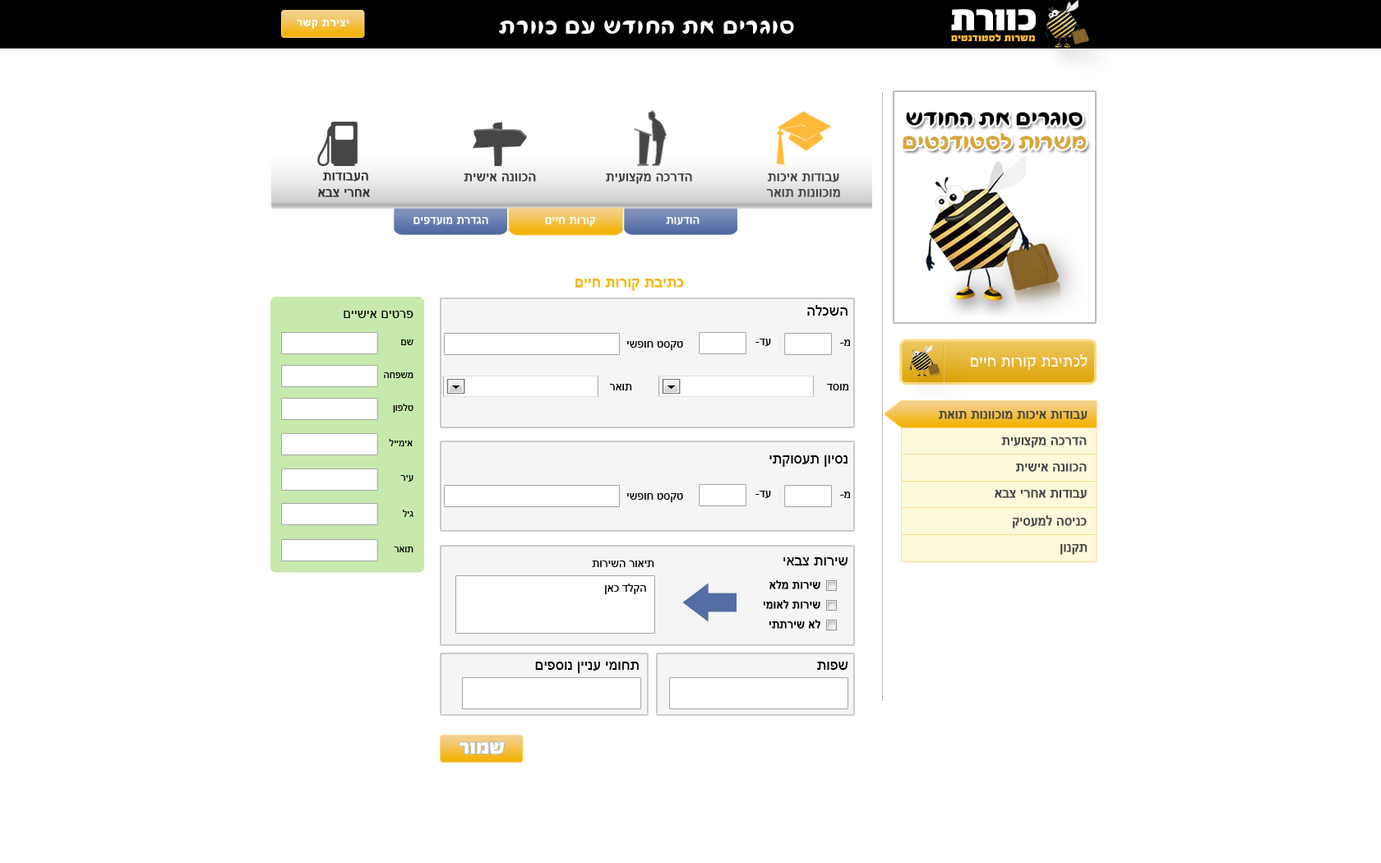
<style>
.page{position:relative;width:1381px;height:863px;background:#ffffff}
.page>*{position:absolute;margin:0}
.t1{font:11.5px "Arial-BoldMT";letter-spacing:0.03em;color:#ffffff}
.t2{font:28.8px "FbFlamingo-Regular";letter-spacing:0.03em;color:#ffffff}
.t3{font:9.9px "FbAdrenalin-Black";letter-spacing:0.03em;color:#ffba3a}
.t4{font:13.2px "ArialMT";color:#333333;font-weight:bold}
.t5{font:13.2px "ArialMT";color:#3c3c3c;font-weight:bold}
.t6{font:13.2px "ArialMT";color:#414141;font-weight:bold}
.t7{font:13.2px "ArialMT";color:#484848;font-weight:bold}
.t8{font:11.5px "ArialMT";color:#ffffff;font-weight:bold}
.t9{font:14.8px "ArialMT";color:#f3b510;font-weight:bold}
.t10{font:14.8px "ArialMT";color:#000000}
.t11{font:13.2px "ArialMT";color:#000000}
.t12{font:9.9px "ArialMT";color:#010101}
.t13{font:11.5px "ArialMT";color:#000000}
.t14{font:16.4px "FbConcept-Regular";letter-spacing:0.03em;color:#ffffff}
.t15{font:12.9px "ArialMT";color:#464646;font-weight:bold}
.t16{font:11.5px "ArialMT";color:#010101}
.t17{font:11.5px/19.7px "ArialMT";color:#010101;font-weight:bold}
.t18{font:19.7px "FbAdrenalin-Black";color:#ffffff}
</style>
<div class="page">
<p class="t1" style="left:297px;top:20px;width:52px;height:9px">רשק תריצי</p>
<p class="t2" style="left:499px;top:21px;width:295px;height:14px">תרווכ םע שדוחה תא םירגוס</p>
<p class="t3" style="left:951px;top:34px;width:84px;height:8px">םיטנדוטסל תורשמ</p>
<p class="t4" style="left:318px;top:173px;width:52px;height:24px;text-align:center">תודובעה<br>אבצ ירחא</p>
<p class="t5" style="left:464px;top:173px;width:72px;height:9px">תישיא הנווכה</p>
<p class="t6" style="left:606px;top:173px;width:86px;height:11px">תיעוצקמ הכרדה</p>
<p class="t7" style="left:766px;top:173px;width:74px;height:24px;text-align:center">תוכיא תודובע<br>ראות תונווכומ</p>
<p class="t8" style="left:414px;top:217px;width:286px;height:10px">םיפדעומ תרדגה                םייח תורוק                    תועדוה</p>
<p class="t9" style="left:576px;top:279px;width:108px;height:12px">םייח תורוק תביתכ</p>
<p class="t10" style="left:807px;top:305px;width:41px;height:11px">הלכשה</p>
<p class="t11" style="left:344px;top:311px;width:70px;height:7px">םיישיא םיטרפ</p>
<p class="t12" style="left:401px;top:340px;width:13px;height:5px">םש</p>
<p class="t13" style="left:627px;top:341px;width:56px;height:9px">ישפוח טסקט</p>
<p class="t13" style="left:756px;top:339px;width:15px;height:7px">-דע</p>
<p class="t13" style="left:840px;top:340px;width:10px;height:6px">-מ</p>
<p class="t14" style="left:971px;top:354px;width:117px;height:16px">םייח תורוק תביתכל</p>
<p class="t12" style="left:384px;top:372px;width:30px;height:6px">החפשמ</p>
<p class="t13" style="left:609px;top:384px;width:23px;height:7px">ראות</p>
<p class="t13" style="left:827px;top:384px;width:21px;height:7px">דסומ</p>
<p class="t12" style="left:393px;top:404px;width:21px;height:9px">ןופלט</p>
<p class="t15" style="left:939px;top:411px;width:149px;height:9px">תאות תונווכומ תוכיא תודובע</p>
<p class="t15" style="left:1001px;top:437px;width:86px;height:11px">תיעוצקמ הכרדה</p>
<p class="t12" style="left:389px;top:439px;width:24px;height:7px">ליימיא</p>
<p class="t10" style="left:770px;top:455px;width:78px;height:12px">יתקוסעת ןויסנ</p>
<p class="t15" style="left:1015px;top:464px;width:72px;height:8px">תישיא הנווכה</p>
<p class="t12" style="left:400px;top:475px;width:14px;height:7px">ריע</p>
<p class="t13" style="left:627px;top:493px;width:56px;height:9px">ישפוח טסקט</p>
<p class="t13" style="left:756px;top:491px;width:15px;height:7px">-דע</p>
<p class="t13" style="left:840px;top:492px;width:10px;height:6px">-מ</p>
<p class="t15" style="left:995px;top:490px;width:92px;height:9px">אבצ ירחא תודובע</p>
<p class="t12" style="left:403px;top:510px;width:11px;height:7px">ליג</p>
<p class="t15" style="left:1013px;top:516px;width:74px;height:13px">קיסעמל הסינכ</p>
<p class="t15" style="left:1061px;top:544px;width:27px;height:11px">ןונקת</p>
<p class="t12" style="left:394px;top:547px;width:20px;height:6px">ראות</p>
<p class="t10" style="left:784px;top:557px;width:64px;height:9px">יאבצ תוריש</p>
<p class="t16" style="left:592px;top:561px;width:62px;height:6px">תורישה רואית</p>
<p class="t17" style="left:763px;top:580px;width:58px;height:49px;text-align:right">אלמ תוריש<br>ימואל תוריש<br>יתתריש אל</p>
<p class="t16" style="left:605px;top:584px;width:41px;height:10px">ןאכ דלקה</p>
<p class="t10" style="left:535px;top:662px;width:104px;height:11px">םיפסונ ןיינע ימוחת</p>
<p class="t10" style="left:817px;top:662px;width:31px;height:8px">תופש</p>
<p class="t18" style="left:459px;top:742px;width:46px;height:13px">רומש</p>
</div>
